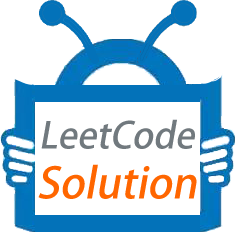
<style>
.page{position:relative;width:236px;height:236px;background:#ffffff}
.page>*{position:absolute;margin:0}
.t1{font:36px "AdobeHeitiStd-Regular";color:#71797e;font-style:italic}
.t2{font:42px "AdobeHeitiStd-Regular";color:#ff6600;font-style:italic}
</style>
<div class="page">
<p class="t1" style="left:41px;top:119px;width:154px;height:30px">LeetCode</p>
<p class="t2" style="left:38px;top:164px;width:159px;height:35px">Solution</p>
</div>
